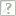
<style>
.page{position:relative;width:16px;height:16px}
.page>*{position:absolute;margin:0}
.t1{font:16.2px "Constantia-Bold";letter-spacing:-0.01em;color:#aaaaaa;text-transform:uppercase}
</style>
<div class="page">
<p class="t1" style="left:5px;top:3px;width:7px;height:11px">?</p>
</div>
